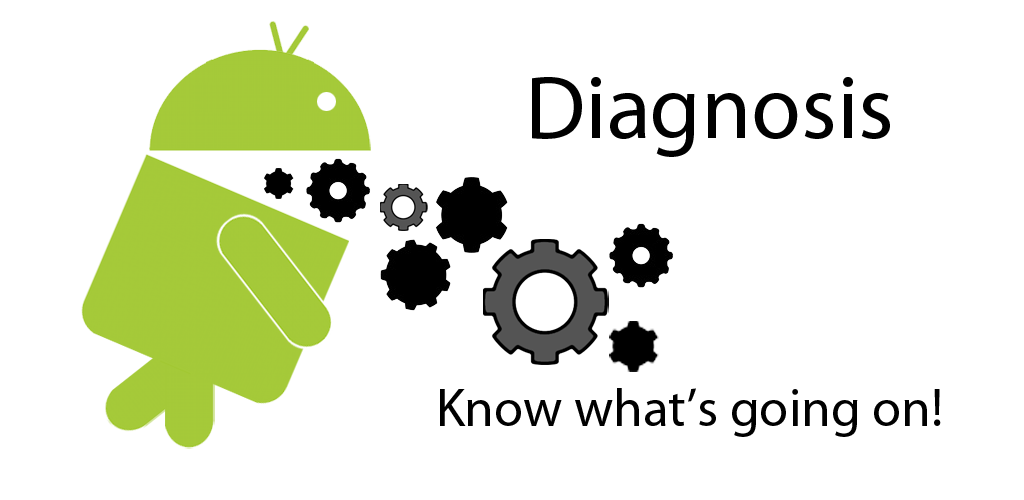
<style>
.page{position:relative;width:1024px;height:500px;background:#ffffff}
.page>*{position:absolute;margin:0}
.t1{font:90.7px "MyriadPro-Regular";color:#000000}
.t2{font:53.3px "MyriadPro-Regular";color:#000000}
</style>
<div class="page">
<p class="t1" style="left:532px;top:77px;width:358px;height:80px">Diagnosis</p>
<p class="t2" style="left:440px;top:388px;width:501px;height:49px">Know what’s going on!</p>
</div>
